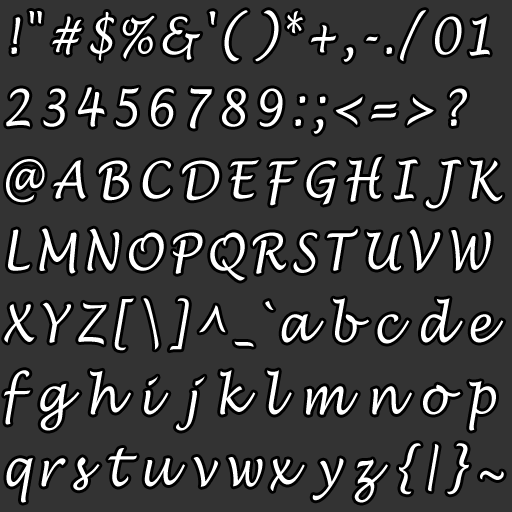
<style>
.page{position:relative;width:512px;height:512px;background:#333333}
.page>*{position:absolute;margin:0}
.t1{font:51px/72px "LucidaHandwriting-Italic";letter-spacing:0.125em;color:#ffffff;scale:0.88 1}
.t2{font:51px/72px "LucidaHandwriting-Italic";letter-spacing:0.05em;color:#ffffff;scale:0.88 1}
.t3{font:51px/72px "LucidaHandwriting-Italic";letter-spacing:0.22em;color:#ffffff;scale:0.88 1}
.t4{font:51px/72px "LucidaHandwriting-Italic";letter-spacing:0.02em;color:#ffffff;scale:0.88 1}
.t5{font:51px/72px "LucidaHandwriting-Italic";letter-spacing:0.09em;color:#ffffff;scale:0.88 1}
.t6{font:51px/200px "LucidaHandwriting-Italic";letter-spacing:0.04em;color:#ffffff;scale:0.88 1}
.t7{font:51px/72px "LucidaHandwriting-Italic";letter-spacing:0.2em;color:#ffffff;scale:0.88 1}
.t8{font:51px/72px "LucidaHandwriting-Italic";letter-spacing:0.03em;color:#ffffff;scale:0.88 1}
.t9{font:51px/72px "LucidaHandwriting-Italic";letter-spacing:0.08em;color:#ffffff;scale:0.88 1}
.t10{font:51px/72px "LucidaHandwriting-Italic";color:#ffffff;scale:0.88 1}
.t11{font:51px/72px "LucidaHandwriting-Italic";letter-spacing:0.06em;color:#ffffff;scale:0.88 1}
.t12{font:51px/72px "LucidaHandwriting-Italic";letter-spacing:0.28em;color:#ffffff;scale:0.88 1}
.t13{font:51px/72px "LucidaHandwriting-Italic";letter-spacing:0.145em;color:#ffffff;scale:0.88 1}
.t14{font:51px/72px "LucidaHandwriting-Italic";letter-spacing:0.24em;color:#ffffff;scale:0.88 1}
.t15{font:51px/72px "LucidaHandwriting-Italic";letter-spacing:0.36em;color:#ffffff;scale:0.88 1}
.t16{font:51px/72px "LucidaHandwriting-Italic";letter-spacing:0.23em;color:#ffffff;scale:0.88 1}
.t17{font:51px/72px "LucidaHandwriting-Italic";letter-spacing:0.17em;color:#ffffff;scale:0.88 1}
.t18{font:51px/72px "LucidaHandwriting-Italic";letter-spacing:0.013em;color:#ffffff;scale:0.88 1}
.t19{font:51px/72px "LucidaHandwriting-Italic";letter-spacing:0.18em;color:#ffffff;scale:0.88 1}
.t20{font:51px/72px "LucidaHandwriting-Italic";letter-spacing:0.16em;color:#ffffff;scale:0.88 1}
.t21{font:51px/72px "LucidaHandwriting-Italic";letter-spacing:-0.2em;color:#ffffff;scale:0.88 1}
.t22{font:51px/72px "LucidaHandwriting-Italic";letter-spacing:0.35em;color:#ffffff;scale:0.88 1}
.t23{font:51px/72px "LucidaHandwriting-Italic";letter-spacing:0.33em;color:#ffffff;scale:0.88 1}
.t24{font:51px/72px "LucidaHandwriting-Italic";letter-spacing:0.4em;color:#ffffff;scale:0.88 1}
.t25{font:51px/72px "LucidaHandwriting-Italic";letter-spacing:0.32em;color:#ffffff;scale:0.88 1}
.t26{font:51px/72px "LucidaHandwriting-Italic";letter-spacing:0.6em;color:#ffffff;scale:0.88 1}
.t27{font:51px/72px "LucidaHandwriting-Italic";letter-spacing:0.12em;color:#ffffff;scale:0.88 1}
.t28{font:51px/72px "LucidaHandwriting-Italic";letter-spacing:0.46em;color:#ffffff;scale:0.88 1}
.t29{font:51px/72px "LucidaHandwriting-Italic";letter-spacing:0.3em;color:#ffffff;scale:0.88 1}
</style>
<div class="page">
<p class="t1" style="left:4px;top:10px;width:500px;height:493px"><span class="t2">!</span><span class="t3">"</span>#<span class="t4">$</span>%<span class="t5">&amp;</span><span class="t6">'</span><span class="t7">(</span><span class="t8">)</span>*<span class="t9">+</span><span class="t10">,</span><span class="t11">-.</span><span class="t12">/</span><span class="t2">0</span>1<br>23456789<span class="t13">:</span>;&lt;=&gt;?<br><span class="t7">@ABCDE</span><span class="t14">F</span><span class="t7">GH</span><span class="t15">I</span><span class="t16">J</span><span class="t7">K<br></span>LMNOPQRS<span class="t14">T</span>U<span class="t14">V</span>W<br><span class="t17">X</span><span class="t3">Y</span><span class="t18">Z</span><span class="t19">[</span>\]<span class="t20">^</span><span class="t21">_</span><span class="t10">`</span><span class="t22">a</span><span class="t23">b</span><span class="t24">c</span><span class="t25">d</span><span class="t24">e<br>fgh</span><span class="t26">i</span><span class="t24">jklmno</span><span class="t19">p<br></span><span class="t27">q</span><span class="t7">r</span><span class="t24">s</span><span class="t12">t</span><span class="t22">u</span><span class="t7">v</span><span class="t9">w</span><span class="t28">x</span><span class="t7">y</span><span class="t29">z</span><span class="t7">{|}~</span></p>
</div>
